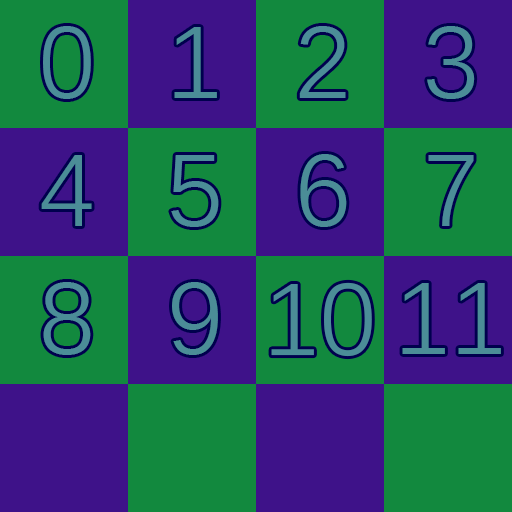
<style>
.page{position:relative;width:512px;height:512px;background:#3e1289}
.page>*{position:absolute;margin:0}
.t1{font:100px "Kalinga";color:#4b8d97}
</style>
<div class="page">
<p class="t1" style="left:43px;top:26px;width:48px;height:73px">0</p>
<p class="t1" style="left:174px;top:27px;width:43px;height:71px">1</p>
<p class="t1" style="left:299px;top:26px;width:47px;height:72px">2</p>
<p class="t1" style="left:427px;top:26px;width:48px;height:73px">3</p>
<p class="t1" style="left:41px;top:155px;width:51px;height:71px">4</p>
<p class="t1" style="left:171px;top:155px;width:48px;height:72px">5</p>
<p class="t1" style="left:300px;top:154px;width:47px;height:73px">6</p>
<p class="t1" style="left:428px;top:155px;width:46px;height:71px">7</p>
<p class="t1" style="left:43px;top:282px;width:48px;height:73px">8</p>
<p class="t1" style="left:172px;top:282px;width:46px;height:73px">9</p>
<p class="t1" style="left:271px;top:282px;width:101px;height:75px">10</p>
<p class="t1" style="left:402px;top:283px;width:99px;height:71px">11</p>
</div>
